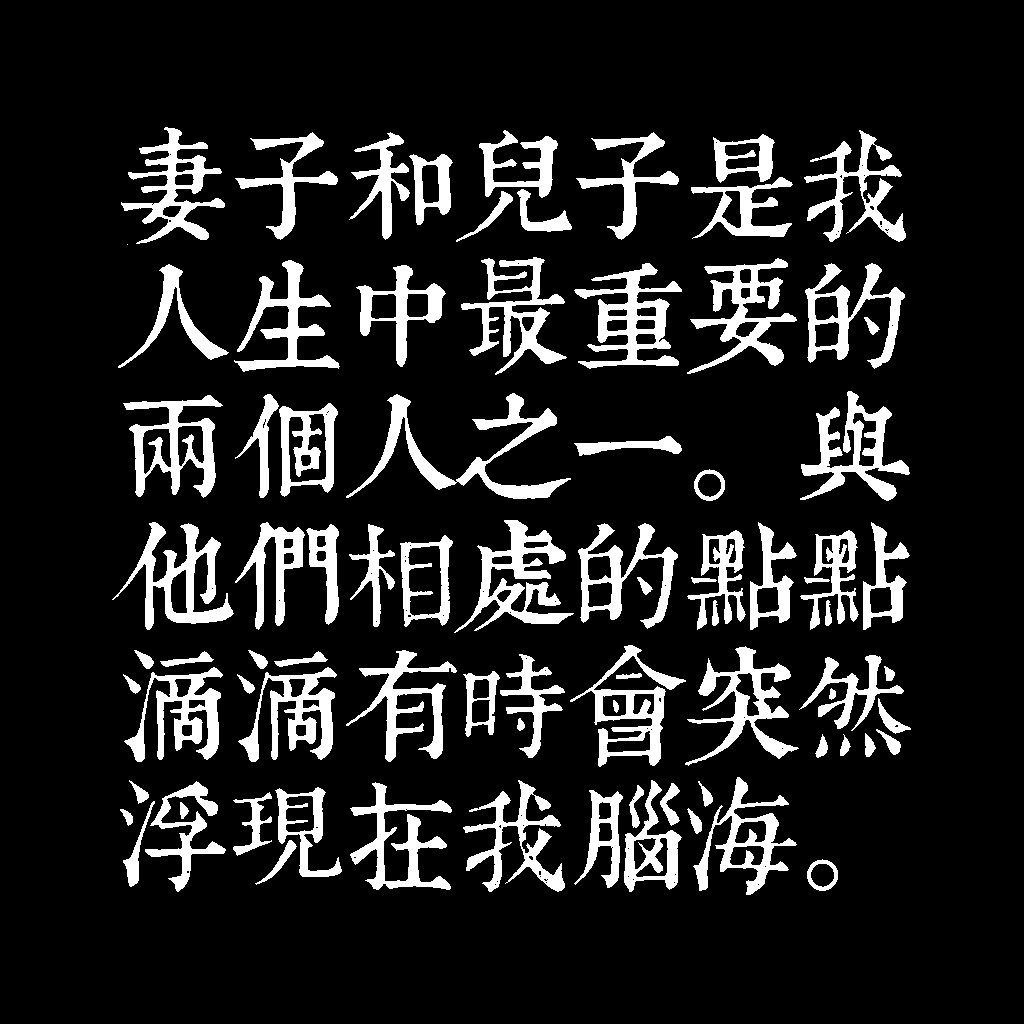
<style>
.page{position:relative;width:1024px;height:1024px;background:#000000}
.page>*{position:absolute;margin:0}
.t1{font:116px/130px "TpldKhangXiDictTrial";letter-spacing:-0.02em;color:#ffffff}
</style>
<div class="page">
<p class="t1" style="left:112px;top:127px;width:799px;height:768px">妻子和兒子是我<br>人生中最重要的<br>兩個人之一。與<br>他們相處的點點<br>滴滴有時會突然<br>浮現在我腦海。</p>
</div>
